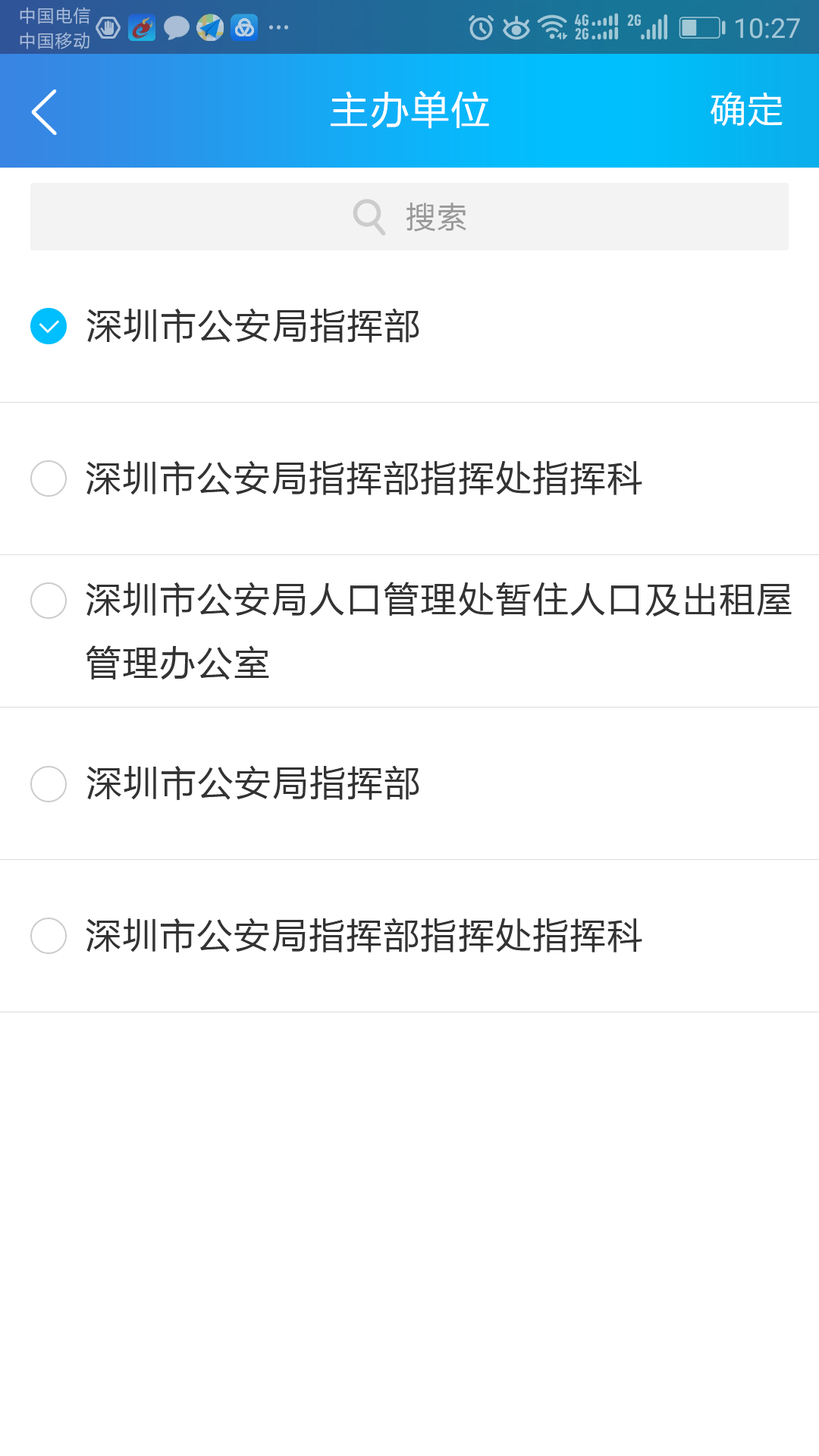
<style>
.page{position:relative;width:819px;height:1456px;background:#ffffff}
.page>*{position:absolute;margin:0}
.t1{font:39.4px "FZLTHK--GBK1-0";letter-spacing:0.025em;color:#ffffff}
.t2{font:36.4px "FZLTHK--GBK1-0";letter-spacing:0.025em;color:#ffffff}
.t3{font:30.3px "FZLTHK--GBK1-0";letter-spacing:0.025em;color:#999999}
.t4{font:36.4px "FZLTHK--GBK1-0";letter-spacing:0.025em;color:#333333}
</style>
<div class="page">
<p class="t1" style="left:331px;top:91px;width:158px;height:38px">主办单位</p>
<p class="t2" style="left:711px;top:92px;width:72px;height:35px">确定</p>
<p class="t3" style="left:406px;top:202px;width:60px;height:29px">搜索</p>
<p class="t4" style="left:86px;top:308px;width:333px;height:35px">深圳市公安局指挥部</p>
<p class="t4" style="left:86px;top:460px;width:556px;height:35px">深圳市公安局指挥部指挥处指挥科</p>
<p class="t4" style="left:86px;top:582px;width:706px;height:98px">深圳市公安局人口管理处暂住人口及出租屋<br>管理办公室</p>
<p class="t4" style="left:86px;top:765px;width:333px;height:35px">深圳市公安局指挥部</p>
<p class="t4" style="left:86px;top:918px;width:556px;height:34px">深圳市公安局指挥部指挥处指挥科</p>
</div>
